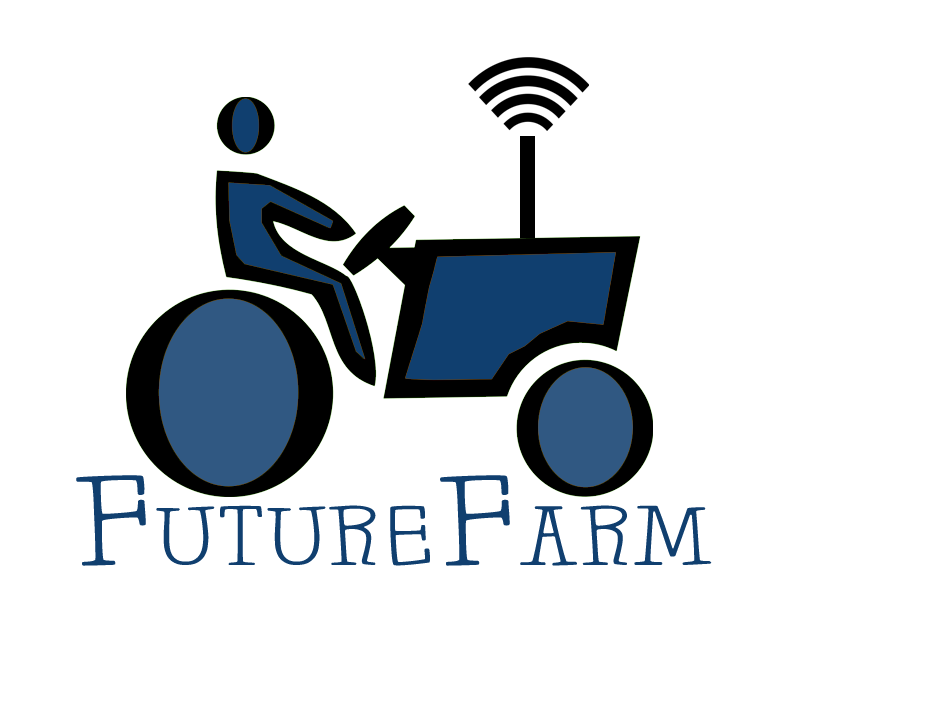
<style>
.page{position:relative;width:949px;height:720px;background:#ffffff}
.page>*{position:absolute;margin:0}
.t1{font:104.5px "FarmtoMarket";color:#103f6f;scale:1.43 1}
.t2{font:156.8px "FarmtoMarket";color:#103f6f;scale:1.43 1}
</style>
<div class="page">
<p class="t1" style="left:76px;top:475px;width:636px;height:91px"><span class="t2">F</span>uture<span class="t2">F</span>arm</p>
</div>
